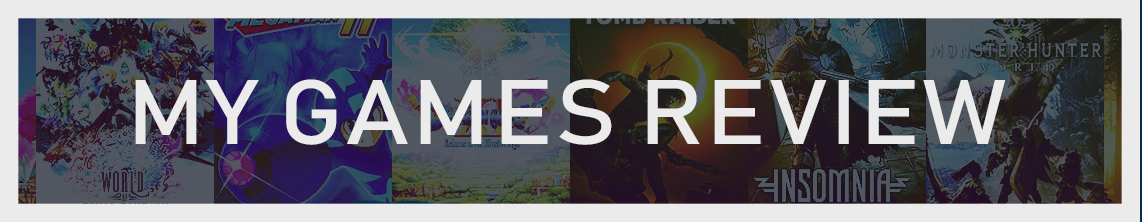
<style>
.page{position:relative;width:1142px;height:222px;background:#ebebeb}
.page>*{position:absolute;margin:0}
.t1{font:90px "Bahnschrift";letter-spacing:0.025em;color:#ebebeb;scale:1.11 1}
</style>
<div class="page">
<p class="t1" style="left:135px;top:79px;width:871px;height:66px">MY GAMES REVIEW</p>
</div>
